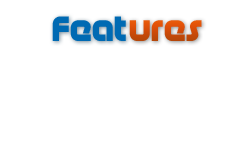
<style>
.page{position:relative;width:250px;height:160px;background:#ffffff}
.page>*{position:absolute;margin:0}
.t1{font:35px "Age";letter-spacing:0.025em;color:#006ab3}
.t2{font:35px "Age";letter-spacing:0.025em}
</style>
<div class="page">
<p class="t1" style="left:52px;top:16px;width:74px;height:25px">Feat</p>
<p class="t2" style="left:129px;top:20px;width:73px;height:21px">ures</p>
</div>
